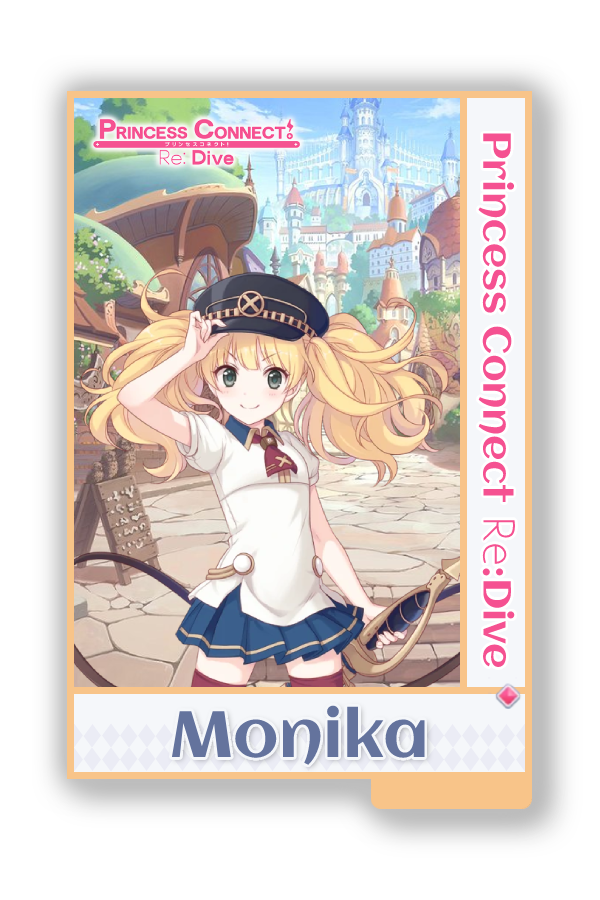
<style>
.page{position:relative;width:600px;height:900px;background:#ffffff}
.page>*{position:absolute;margin:0}
.t1{font:39px "Aclonica-Regular";color:#f55191}
.t2{font:39px "AaarghNormal";color:#f55191}
.t3{font:65px "Aclonica-Regular";color:#64739d}
</style>
<div class="page">
<p class="t1" style="left:478px;top:133px;width:38px;height:534px;rotate:90deg">Princess Connect <span class="t2">Re</span>:Dive</p>
<p class="t3" style="left:171px;top:705px;width:254px;height:60px">Monika</p>
</div>
